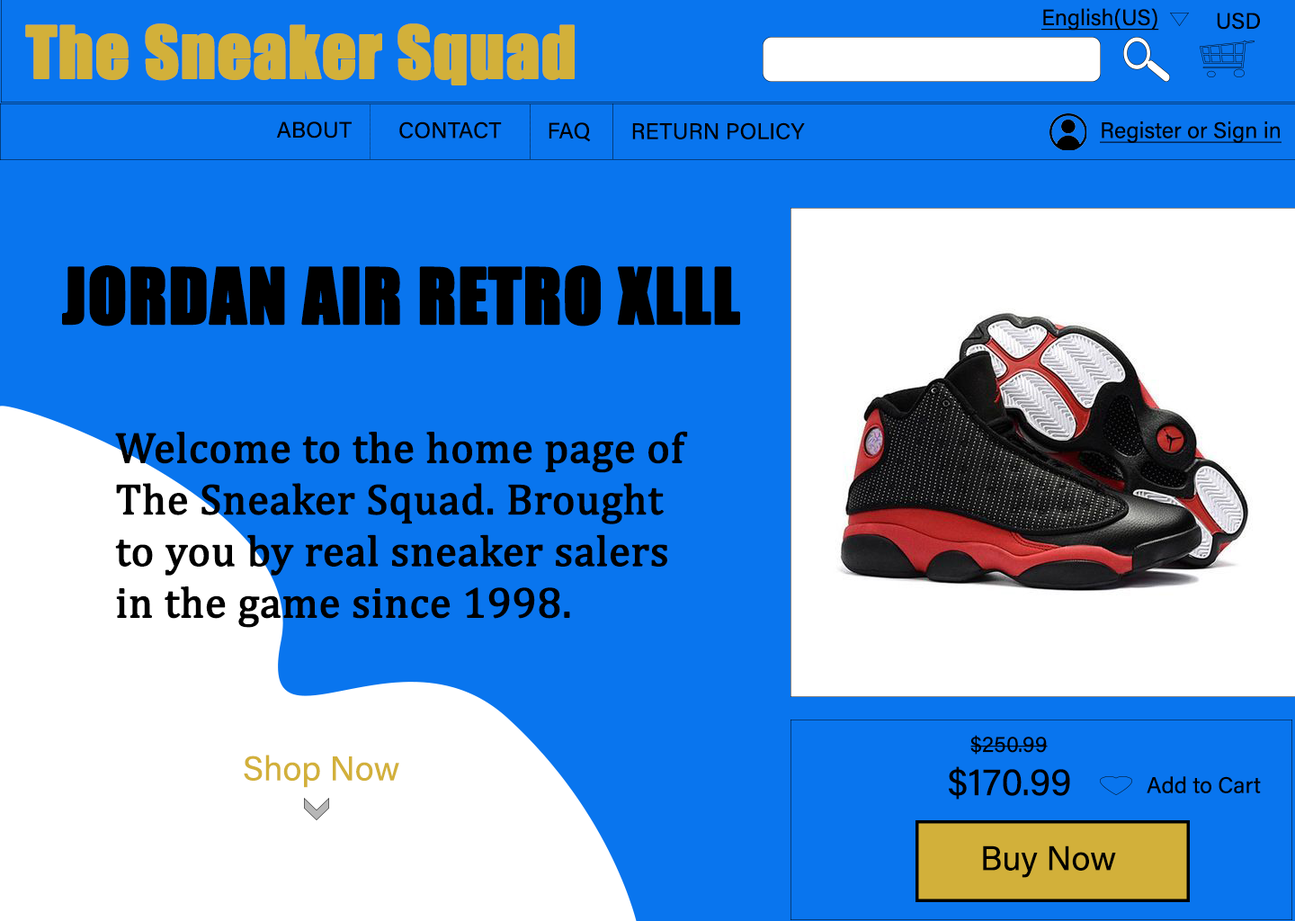
<style>
.page{position:relative;width:1295px;height:921px;background:#0975ee}
.page>*{position:absolute;margin:0}
.t1{font:22.5px "AcuminConcept-Regular";color:#000000;font-weight:bold;text-decoration:underline}
.t2{font:22.5px "AcuminConcept-Regular";color:#000000;font-weight:bold}
.t3{font:66.5px "Impact";color:#d2b03a;font-weight:bold}
.t4{font:71px "Impact";color:#000000;text-transform:uppercase;font-weight:bold}
.t5{font:43px "Cambria";color:#000000;font-weight:bold}
.t6{font:34.2px "AcuminConcept-Regular";color:#d2b03a;font-weight:bold}
.t7{font:38.7px "AcuminConcept-Regular";color:#000000;font-weight:bold}
.t8{font:34.2px "AcuminConcept-Regular";color:#000000;font-weight:bold}
</style>
<div class="page">
<p class="t1" style="left:1041px;top:8px;width:118px;height:23px">English(US)</p>
<p class="t2" style="left:1217px;top:13px;width:43px;height:17px">USD</p>
<p class="t3" style="left:25px;top:23px;width:550px;height:62px">The Sneaker Squad</p>
<p class="t2" style="left:276px;top:121px;width:76px;height:17px">ABOUT</p>
<p class="t2" style="left:399px;top:121px;width:103px;height:17px">CONTACT</p>
<p class="t2" style="left:549px;top:122px;width:42px;height:20px">FAQ</p>
<p class="t2" style="left:632px;top:122px;width:173px;height:17px">RETURN POLICY</p>
<p class="t1" style="left:1100px;top:121px;width:181px;height:22px">Register or Sign in</p>
<p class="t4" style="left:62px;top:265px;width:678px;height:61px">Jordan Air Retro Xlll</p>
<p class="t5" style="left:115px;top:431px;width:573px;height:197px">Welcome to the home page of <br>The Sneaker Squad. Brought <br>to you by real sneaker salers <br>in the game since 1998.</p>
<p class="t2" style="left:970px;top:735px;width:78px;height:19px">$250.99</p>
<p class="t6" style="left:244px;top:754px;width:155px;height:34px">Shop Now</p>
<p class="t7" style="left:949px;top:766px;width:121px;height:33px">$170.99</p>
<p class="t2" style="left:1147px;top:776px;width:114px;height:17px">Add to Cart</p>
<p class="t8" style="left:983px;top:845px;width:133px;height:33px">Buy Now</p>
</div>
